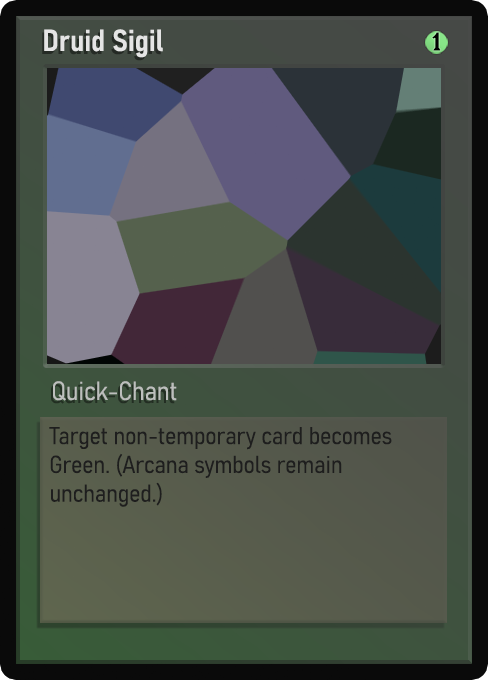
<style>
.page{position:relative;width:488px;height:680px}
.page>*{position:absolute;margin:0}
.t1{font:30px "Bahnschrift-SemiBoldSemiCondensed";color:#f2f2f2;font-weight:bold}
.t2{font:25px "WTRRoycroft";color:#000000;font-weight:bold;scale:1.09 1}
.t3{font:26px "Bahnschrift-LightSemiCondensed";color:#c8c8c8;font-weight:bold}
.t4{font:24px "Bahnschrift-LightSemiCondensed";color:#1e1e1e;font-weight:bold}
</style>
<div class="page">
<p class="t1" style="left:44px;top:29px;width:119px;height:29px;opacity:0.9">Druid Sigil</p>
<p class="t2" style="left:432px;top:32px;width:9px;height:19px">1</p>
<p class="t3" style="left:53px;top:381px;width:124px;height:20px;opacity:0.9">Quick-Chant</p>
<p class="t4" style="left:49px;top:427px;width:343px;height:80px">Target non-temporary card becomes Green. (Arcana symbols remain unchanged.)</p>
</div>
